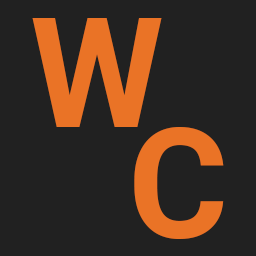
<style>
.page{position:relative;width:256px;height:256px;background:#212121}
.page>*{position:absolute;margin:0}
.t1{font:153.1px "Roboto-Bold";color:#ea7326}
</style>
<div class="page">
<p class="t1" style="left:32px;top:18px;width:130px;height:109px">W</p>
<p class="t1" style="left:134px;top:127px;width:90px;height:112px">C</p>
</div>
